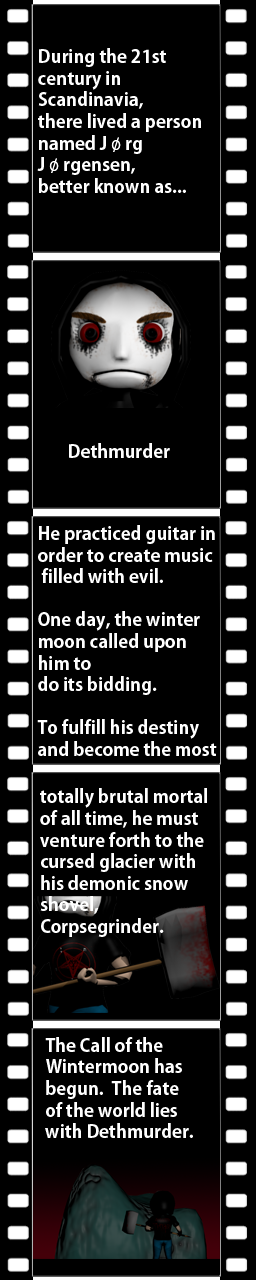
<style>
.page{position:relative;width:256px;height:1280px;background:#000000}
.page>*{position:absolute;margin:0}
.t1{font:18px "AdobeGothicStd-Bold";color:#ffffff}
</style>
<div class="page">
<p class="t1" style="left:37px;top:48px;width:164px;height:145px">During the 21st<br>century in<br>Scandinavia,<br>there lived a person<br>named Jørg<br>Jørgensen,<br>better known as...</p>
<p class="t1" style="left:69px;top:443px;width:101px;height:15px">Dethmurder</p>
<p class="t1" style="left:37px;top:525px;width:180px;height:231px">He practiced guitar in<br>order to create music<br> filled with evil.<br><br>One day, the winter<br>moon called upon<br>him to<br>do its bidding.<br><br>To fulfill his destiny<br>and become the most</p>
<p class="t1" style="left:40px;top:788px;width:167px;height:149px">totally brutal mortal<br>of all time, he must<br>venture forth to the<br>cursed glacier with<br>his demonic snow<br>shovel,<br>Corpsegrinder.</p>
<p class="t1" style="left:45px;top:1037px;width:148px;height:101px">The Call of the<br>Wintermoon has<br>begun.  The fate<br>of the world lies<br>with Dethmurder.</p>
</div>
